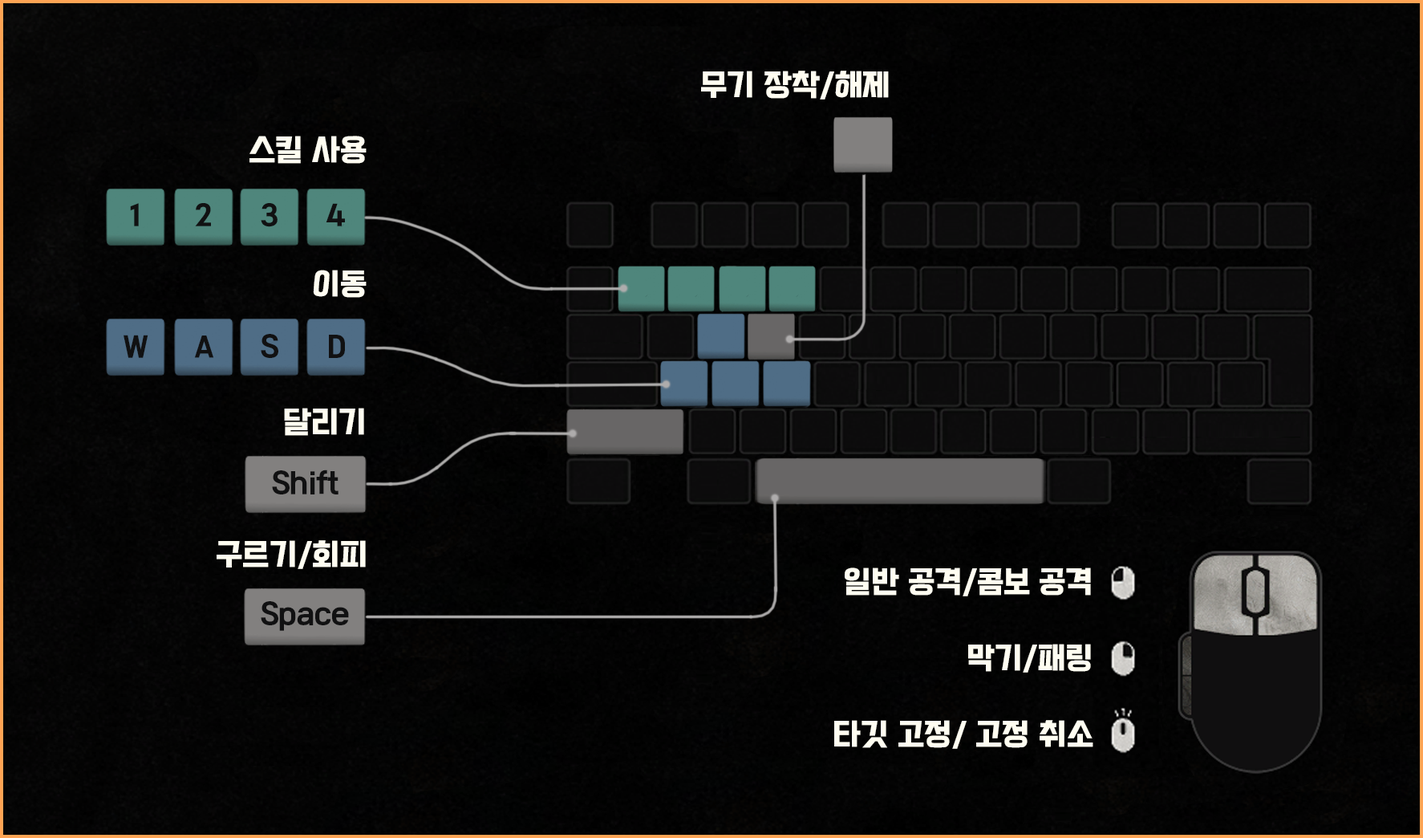
<style>
.page{position:relative;width:1423px;height:838px}
.page>*{position:absolute;margin:0}
.t1{font:31.2px "Cafe24OhsquareOTF";color:#fffdf1}
.t2{font:27.6px "Cafe24OhsquareOTF";color:#111112}
</style>
<div class="page">
<p class="t1" style="left:701px;top:71px;width:188px;height:28px">무기 장착/해제</p>
<p class="t1" style="left:250px;top:136px;width:117px;height:28px">스킬 사용</p>
<p class="t2" style="left:130px;top:203px;width:9px;height:23px">1</p>
<p class="t2" style="left:195px;top:203px;width:16px;height:23px">2</p>
<p class="t2" style="left:261px;top:203px;width:17px;height:24px">3</p>
<p class="t2" style="left:326px;top:203px;width:19px;height:23px">4</p>
<p class="t1" style="left:313px;top:270px;width:54px;height:28px">이동</p>
<p class="t1" style="left:284px;top:408px;width:80px;height:28px">달리기</p>
<p class="t2" style="left:272px;top:469px;width:67px;height:25px">Shift</p>
<p class="t1" style="left:217px;top:540px;width:149px;height:29px">구르기/회피</p>
<p class="t1" style="left:845px;top:567px;width:246px;height:29px">일반 공격/콤보 공격</p>
<p class="t1" style="left:968px;top:644px;width:123px;height:28px">막기/패링</p>
<p class="t1" style="left:834px;top:720px;width:260px;height:29px">타깃 고정/ 고정 취소</p>
</div>
